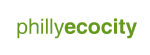
<style>
.page{position:relative;width:150px;height:55px;background:#ffffff}
.page>*{position:absolute;margin:0}
.t1{font:21.2px "Helvetica-Bold";color:#64991e}
.t2{font:21.2px "Helvetica";color:#64991e}
</style>
<div class="page">
<p class="t1" style="left:17px;top:18px;width:120px;height:21px"><span class="t2">philly</span>ecocity</p>
</div>
